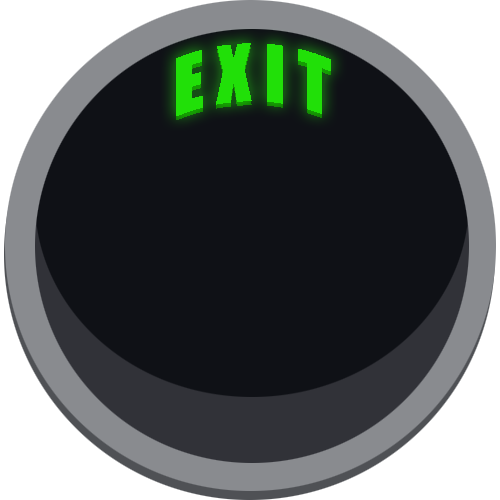
<style>
.page{position:relative;width:500px;height:500px;background:#0f1116}
.page>*{position:absolute;margin:0}
.t1{font:72px "Impact";color:#21e008}
</style>
<div class="page">
<p class="t1" style="left:176px;top:47px;width:155px;height:73px">E X I T</p>
</div>
